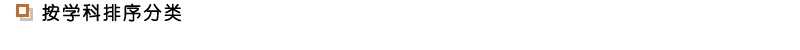
<style>
.page{position:relative;width:800px;height:50px;background:#ffffff}
.page>*{position:absolute;margin:0}
.t1{font:18px "YouYuan";letter-spacing:0.1em;color:#000000;font-weight:bold}
</style>
<div class="page">
<p class="t1" style="left:42px;top:3px;width:139px;height:19px">按学科排序分类</p>
</div>
